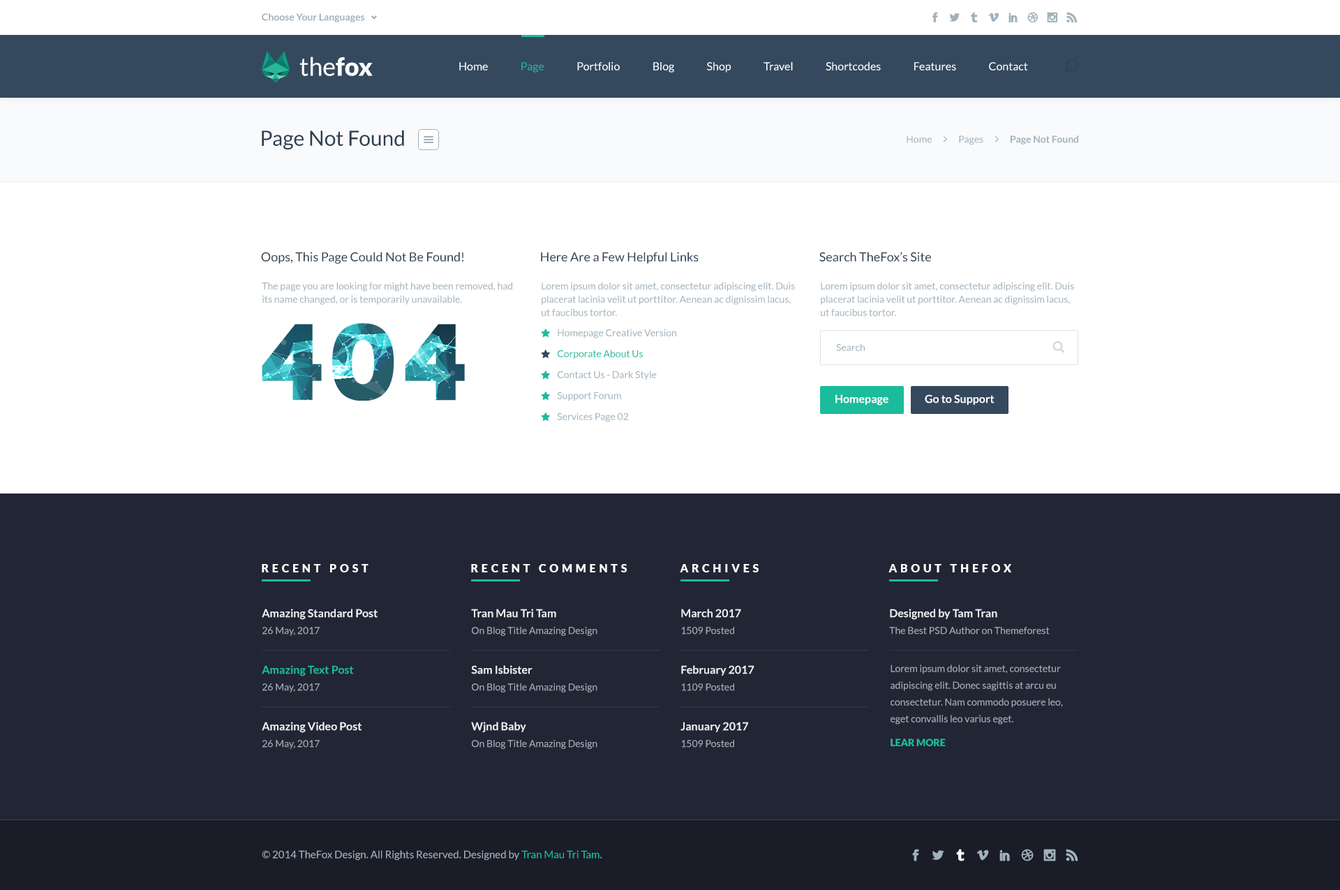
<style>
.page{position:relative;width:1340px;height:890px;background:#ffffff}
.page>*{position:absolute;margin:0}
.t1{font:9.8px "Lato-Bold";color:#a1b1bc}
.t2{font:25.1px "Lato-Regular";color:#ffffff}
.t3{font:25.1px "Lato-Black";color:#ffffff}
.t4{font:11.2px "Lato-Regular";color:#ffffff}
.t5{font:11.2px "Lato-Regular";color:#1abc9c}
.t6{font:20.9px "Lato-Regular";color:#2c3e50}
.t7{font:9.8px "Lato-Regular";color:#a1b1bc}
.t8{font:12.6px "Lato-Regular";color:#2c3e50}
.t9{font:9.8px/13.3px "Lato-Regular";color:#a1b1bc}
.t10{font:9.8px/20.9px "Lato-Regular";color:#a1b1bc}
.t11{font:9.8px/20.9px "Lato-Regular";color:#1abc9c}
.t12{font:11.2px "Lato-Bold";color:#ffffff}
.t13{font:11.2px "Lato-Black";letter-spacing:0.3em;color:#ffffff}
.t14{font:11.2px/16.8px "Lato-Bold";color:#ecf0f1}
.t15{font:9.8px/16.8px "Lato-Regular";color:#a1b1bc}
.t16{font:11.2px/16.8px "Lato-Bold";color:#1abc9c}
.t17{font:9.8px "Lato-Black";color:#1abc9c}
.t18{font:10.5px "Lato-Regular";color:#a1b1bc}
.t19{font:10.5px "Lato-Regular";color:#1abc9c}
</style>
<div class="page">
<p class="t1" style="left:262px;top:13px;width:103px;height:9px">Choose Your Languages</p>
<p class="t2" style="left:299px;top:57px;width:74px;height:19px">the<span class="t3">fox</span></p>
<p class="t4" style="left:459px;top:62px;width:569px;height:11px">Home               <span class="t5">Page               </span>Portfolio               Blog               Shop               Travel               Shortcodes               Features               Contact</p>
<p class="t6" style="left:262px;top:130px;width:142px;height:20px">Page Not Found</p>
<p class="t7" style="left:907px;top:135px;width:171px;height:9px">Home              Pages              <span class="t1">Page Not Found</span></p>
<p class="t8" style="left:261px;top:252px;width:203px;height:12px">Oops, This Page Could Not Be Found!</p>
<p class="t8" style="left:541px;top:252px;width:158px;height:12px">Here Are a Few Helpful Links</p>
<p class="t8" style="left:819px;top:252px;width:112px;height:10px">Search TheFox’s Site</p>
<p class="t9" style="left:262px;top:282px;width:250px;height:23px">The page you are looking for might have been removed, had its name changed, or is temporarily unavailable.</p>
<p class="t9" style="left:542px;top:282px;width:253px;height:34px">Lorem ipsum dolor sit amet, consectetur adipiscing elit. Duis placerat lacinia velit ut porttitor. Aenean ac dignissim lacus, ut faucibus tortor.</p>
<p class="t9" style="left:821px;top:282px;width:253px;height:34px">Lorem ipsum dolor sit amet, consectetur adipiscing elit. Duis placerat lacinia velit ut porttitor. Aenean ac dignissim lacus, ut faucibus tortor.</p>
<p class="t10" style="left:557px;top:329px;width:119px;height:93px">Homepage Creative Version<br><span class="t11">Corporate About Us<br></span>Contact Us - Dark Style<br>Support Forum<br>Services Page 02</p>
<p class="t7" style="left:836px;top:343px;width:29px;height:8px">Search</p>
<p class="t12" style="left:835px;top:394px;width:53px;height:11px">Homepage</p>
<p class="t12" style="left:925px;top:394px;width:70px;height:11px">Go to Support</p>
<p class="t13" style="left:262px;top:564px;width:107px;height:8px">RECENT POST</p>
<p class="t13" style="left:471px;top:564px;width:156px;height:8px">RECENT COMMENTS</p>
<p class="t13" style="left:680px;top:564px;width:79px;height:8px">ARCHIVES</p>
<p class="t13" style="left:888px;top:564px;width:123px;height:8px">ABOUT THEFOX</p>
<p class="t14" style="left:262px;top:609px;width:116px;height:27px">Amazing Standard Post<br><span class="t15">26 May, 2017</span></p>
<p class="t15" style="left:471px;top:609px;width:126px;height:27px"><span class="t14">Tran Mau Tri Tam<br></span>On Blog Title Amazing Design</p>
<p class="t15" style="left:681px;top:609px;width:60px;height:25px"><span class="t14">March 2017<br></span>1509 Posted</p>
<p class="t15" style="left:889px;top:609px;width:161px;height:25px"><span class="t14">Designed by Tam Tran<br></span>The Best PSD Author on Themeforest</p>
<p class="t16" style="left:262px;top:665px;width:92px;height:27px">Amazing Text Post<br><span class="t15">26 May, 2017</span></p>
<p class="t15" style="left:471px;top:665px;width:126px;height:27px"><span class="t14">Sam Isbister<br></span>On Blog Title Amazing Design</p>
<p class="t14" style="left:681px;top:665px;width:73px;height:26px">February 2017<br><span class="t15">1109 Posted</span></p>
<p class="t15" style="left:891px;top:664px;width:172px;height:60px">Lorem ipsum dolor sit amet, consectetur adipiscing elit. Donec sagittis at arcu eu consectetur. Nam commodo posuere leo, eget convallis leo varius eget.</p>
<p class="t14" style="left:262px;top:722px;width:100px;height:27px">Amazing Video Post<br><span class="t15">26 May, 2017</span></p>
<p class="t15" style="left:471px;top:722px;width:126px;height:27px"><span class="t14">Wjnd Baby<br></span>On Blog Title Amazing Design</p>
<p class="t14" style="left:680px;top:722px;width:68px;height:25px">January 2017<br><span class="t15">1509 Posted</span></p>
<p class="t17" style="left:891px;top:738px;width:55px;height:8px">LEAR MORE</p>
<p class="t18" style="left:262px;top:850px;width:340px;height:10px">© 2014 TheFox Design. All Rights Reserved. Designed by <span class="t19">Tran Mau Tri Tam</span>.</p>
</div>
